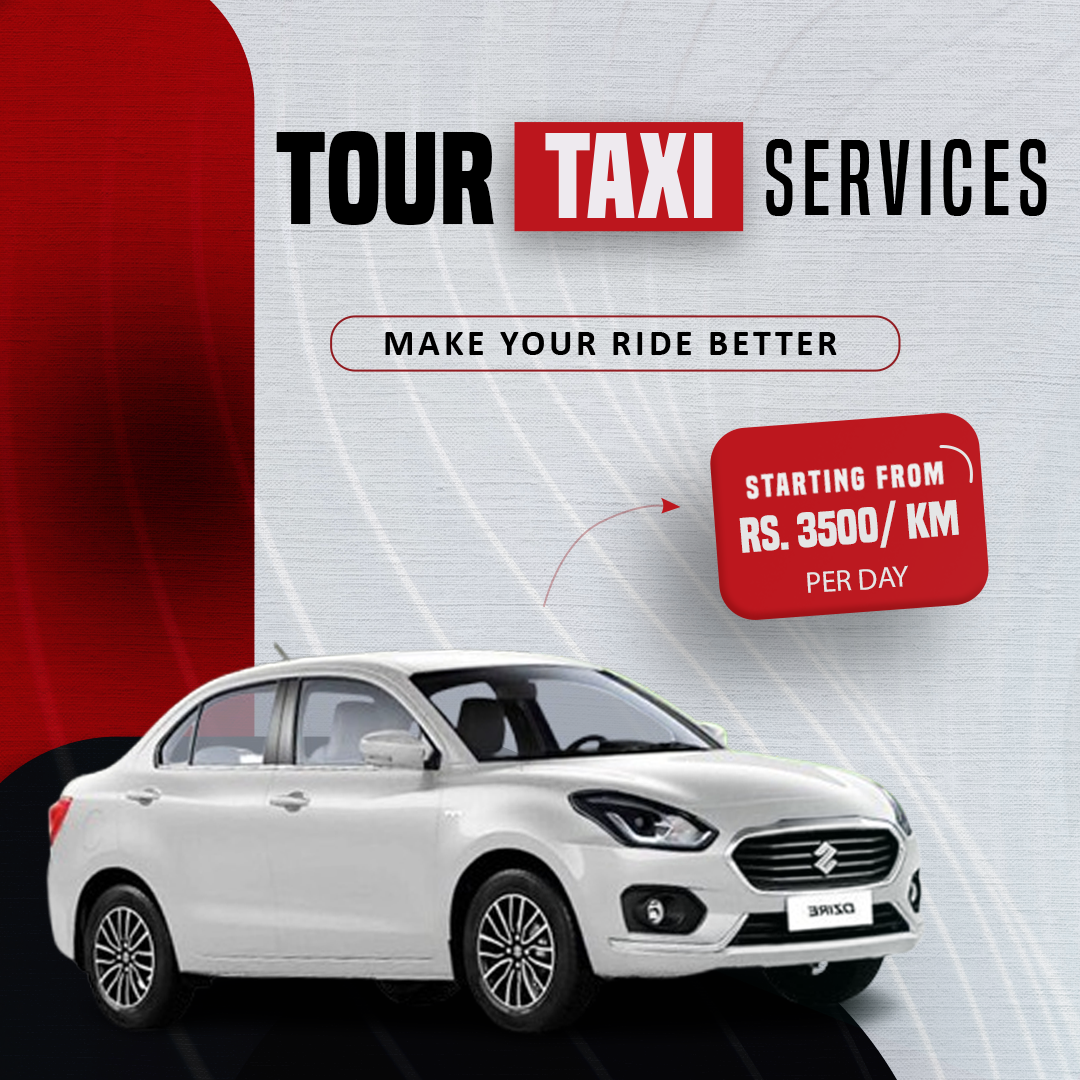
<style>
.page{position:relative;width:1080px;height:1080px}
.page>*{position:absolute;margin:0}
.t1{font:122.4px "BuiltTitlingRg-Bold";letter-spacing:0.005em;color:#000000;text-transform:uppercase}
.t2{font:112.3px "BuiltTitlingRg-Bold";letter-spacing:0.005em;color:#eeeaef;text-transform:uppercase}
.t3{font:98.7px "BuiltTitlingRg-Regular";letter-spacing:0.075em;color:#000000;text-transform:uppercase}
.t4{font:30px "BuiltTitlingRg-Bold";letter-spacing:0.1em;color:#efefef}
.t5{font:46px "BuiltTitlingRg-Bold";letter-spacing:-0.01em;color:#e5e5e5;text-transform:uppercase}
.t6{font:30px "BuiltTitlingRg-Bold";letter-spacing:-0.01em;color:#e5e5e5;text-transform:uppercase}
</style>
<div class="page">
<p class="t1" style="left:276px;top:131px;width:218px;height:94px">Tour</p>
<p class="t2" style="left:545px;top:133px;width:168px;height:85px">TAXi</p>
<p class="t3" style="left:766px;top:139px;width:281px;height:77px">SERVICES</p>
<p class="t4" style="left:745px;top:460px;width:200px;height:40px;rotate:-4deg">Starting From</p>
<p class="t5" style="left:739px;top:499px;width:220px;height:54px;rotate:-5deg">RS. 3500/ KM</p>
<p class="t6" style="left:807px;top:565px;width:101px;height:28px;rotate:-3deg">PER Day</p>
</div>
